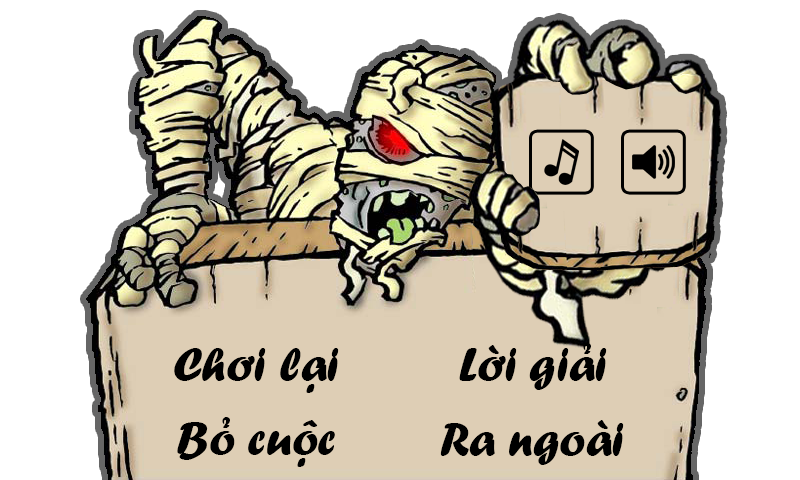
<style>
.page{position:relative;width:800px;height:480px;background:#ffffff}
.page>*{position:absolute;margin:0}
.t1{font:48px "UVNDzungDakao";color:#000000}
</style>
<div class="page">
<p class="t1" style="left:174px;top:348px;width:165px;height:45px">Chơi lại</p>
<p class="t1" style="left:459px;top:343px;width:148px;height:47px">Lời giải</p>
<p class="t1" style="left:177px;top:417px;width:158px;height:50px">Bỏ cuộc</p>
<p class="t1" style="left:440px;top:420px;width:184px;height:45px">Ra ngoài</p>
</div>
